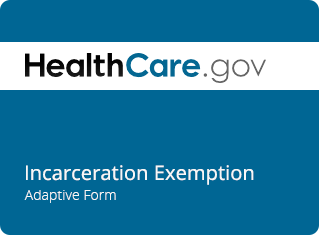
<style>
.page{position:relative;width:319px;height:235px;background:#006694}
.page>*{position:absolute;margin:0}
.t1{font:20px "OpenSans";letter-spacing:0.005em;color:#f7f7f7}
.t2{font:14px "OpenSans-Light";letter-spacing:0.005em;color:#f7f7f7}
</style>
<div class="page">
<p class="t1" style="left:26px;top:165px;width:228px;height:20px">Incarceration Exemption</p>
<p class="t2" style="left:24px;top:190px;width:92px;height:13px">Adaptive Form</p>
</div>
